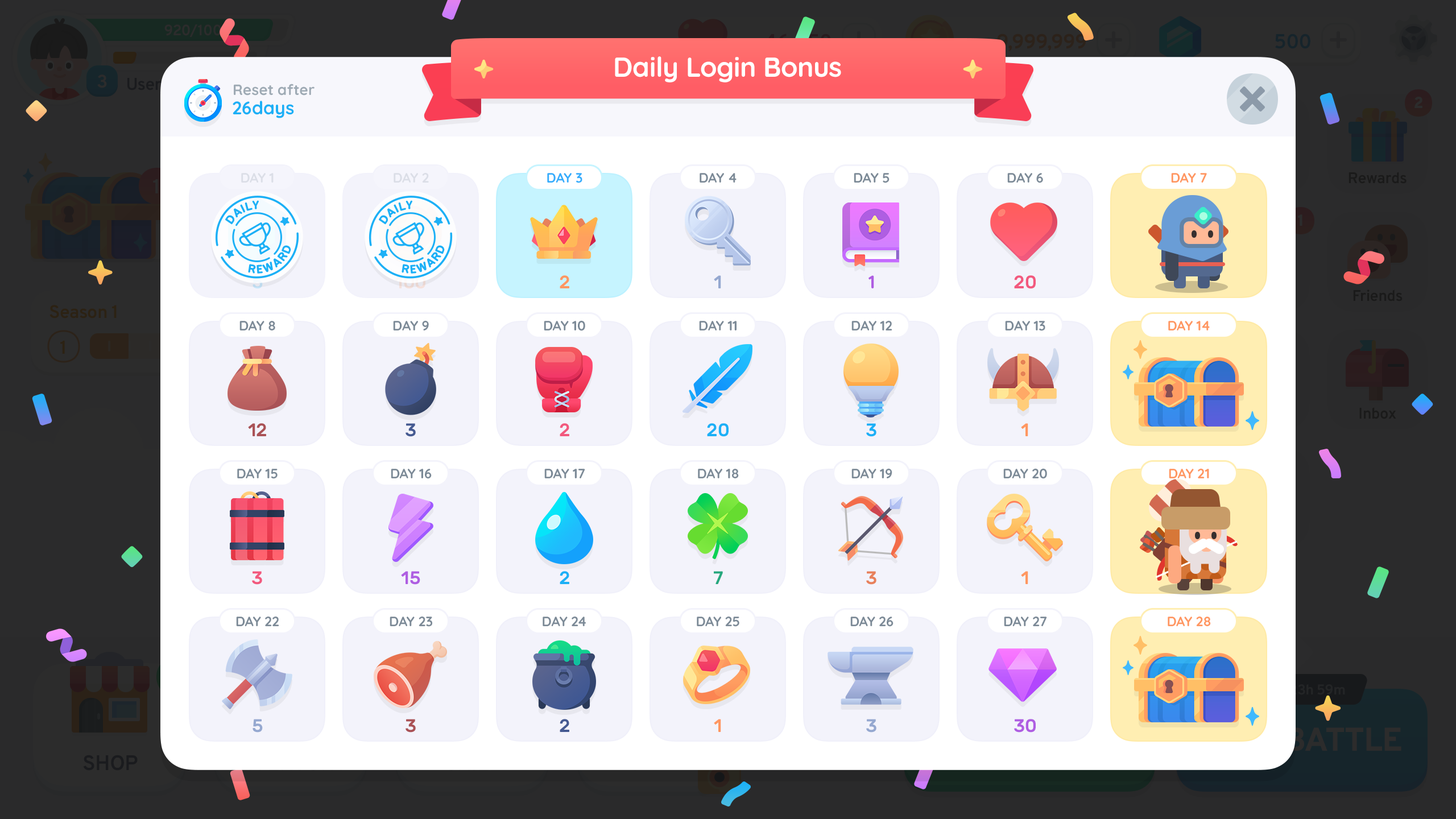
<style>
.page{position:relative;width:1456px;height:819px;background:#ffffff}
.page>*{position:absolute;margin:0}
.t1{font:27.3px "Quicksand-Bold";letter-spacing:-0.01em;color:#ffffff}
.t2{font:14.8px "Quicksand-Bold";color:#9eaab4}
.t3{font:18.2px "Quicksand-Bold";color:#1cb0f6}
.t4{font:13.6px "Quicksand-Bold";letter-spacing:-0.01em;color:#dbdee7;text-transform:uppercase}
.t5{font:13.6px "Quicksand-Bold";letter-spacing:-0.01em;color:#34adfc;text-transform:uppercase}
.t6{font:13.6px "Quicksand-Bold";letter-spacing:-0.01em;color:#7c8a97;text-transform:uppercase}
.t7{font:13.6px "Quicksand-Bold";letter-spacing:-0.01em;color:#ff9761;text-transform:uppercase}
.t8{font:10.9px "BPreplay-Bold";letter-spacing:0.06em;color:#1cb0f6;text-transform:uppercase;scale:1.09 1}
.t9{font:10.9px "BPreplay-Bold";letter-spacing:0.15em;color:#1cb0f6;text-transform:uppercase;scale:1.09 1}
.t10{font:18.2px "Rubik-Medium";letter-spacing:-0.01em}
.t11{font:18.2px "Rubik-Medium";letter-spacing:-0.01em;color:#ff9761}
.t12{font:18.2px "Rubik-Medium";letter-spacing:-0.01em;color:#95a8d0}
.t13{font:18.2px "Quicksand-Bold";letter-spacing:-0.01em;color:#af5ee2}
.t14{font:18.2px "Rubik-Medium";letter-spacing:-0.01em;color:#f2597e}
.t15{font:18.2px "Rubik-Medium";letter-spacing:-0.01em;color:#aa5256}
.t16{font:18.2px "Rubik-Medium";letter-spacing:-0.01em;color:#455a92}
.t17{font:18.2px "Rubik-Medium";letter-spacing:-0.01em;color:#1cb0f6}
.t18{font:18.2px "Rubik-Medium";letter-spacing:-0.01em;color:#af5ee2}
.t19{font:18.2px "Rubik-Medium";letter-spacing:-0.01em;color:#25a87e}
.t20{font:18.2px "Rubik-Medium";letter-spacing:-0.01em;color:#e8815b}
</style>
<div class="page">
<p class="t1" style="left:615px;top:56px;width:226px;height:26px">Daily Login Bonus</p>
<p class="t2" style="left:234px;top:84px;width:81px;height:12px">Reset after</p>
<p class="t3" style="left:233px;top:101px;width:61px;height:17px">26days</p>
<p class="t4" style="left:241px;top:173px;width:33px;height:10px">Day 1</p>
<p class="t4" style="left:394px;top:173px;width:35px;height:10px">Day 2</p>
<p class="t5" style="left:547px;top:173px;width:35px;height:10px">Day 3</p>
<p class="t6" style="left:700px;top:173px;width:37px;height:10px">Day 4</p>
<p class="t6" style="left:854px;top:173px;width:36px;height:10px">Day 5</p>
<p class="t6" style="left:1007px;top:173px;width:36px;height:10px">Day 6</p>
<p class="t7" style="left:1171px;top:173px;width:36px;height:10px">Day 7</p>
<p class="t8" style="left:225px;top:200px;width:34px;height:25px;rotate:-30deg">Daily</p>
<p class="t8" style="left:379px;top:200px;width:33px;height:25px;rotate:-30deg">Daily</p>
<p class="t9" style="left:248px;top:245px;width:43px;height:29px;rotate:-30deg">reward</p>
<p class="t9" style="left:402px;top:245px;width:43px;height:29px;rotate:-30deg">reward</p>
<p class="t10" style="left:395px;top:275px;width:30px;height:14px">100</p>
<p class="t11" style="left:560px;top:275px;width:9px;height:13px">2</p>
<p class="t12" style="left:714px;top:275px;width:7px;height:13px">1</p>
<p class="t13" style="left:868px;top:275px;width:6px;height:13px">1</p>
<p class="t14" style="left:1014px;top:275px;width:22px;height:14px">20</p>
<p class="t6" style="left:239px;top:321px;width:36px;height:9px">Day 8</p>
<p class="t6" style="left:393px;top:321px;width:36px;height:9px">Day 9</p>
<p class="t6" style="left:544px;top:321px;width:41px;height:10px">Day 10</p>
<p class="t6" style="left:699px;top:321px;width:38px;height:9px">Day 11</p>
<p class="t6" style="left:851px;top:321px;width:41px;height:9px">Day 12</p>
<p class="t6" style="left:1005px;top:321px;width:40px;height:10px">Day 13</p>
<p class="t7" style="left:1168px;top:321px;width:42px;height:9px">Day 14</p>
<p class="t15" style="left:248px;top:423px;width:18px;height:13px">12</p>
<p class="t16" style="left:406px;top:423px;width:10px;height:14px">3</p>
<p class="t14" style="left:560px;top:423px;width:9px;height:13px">2</p>
<p class="t17" style="left:707px;top:423px;width:22px;height:14px">20</p>
<p class="t17" style="left:866px;top:423px;width:10px;height:14px">3</p>
<p class="t11" style="left:1021px;top:423px;width:7px;height:13px">1</p>
<p class="t6" style="left:237px;top:469px;width:41px;height:10px">Day 15</p>
<p class="t6" style="left:391px;top:469px;width:41px;height:10px">Day 16</p>
<p class="t6" style="left:544px;top:469px;width:41px;height:9px">Day 17</p>
<p class="t6" style="left:698px;top:469px;width:41px;height:9px">Day 18</p>
<p class="t6" style="left:851px;top:469px;width:41px;height:9px">Day 19</p>
<p class="t6" style="left:1003px;top:469px;width:44px;height:10px">Day 20</p>
<p class="t7" style="left:1169px;top:469px;width:40px;height:9px">Day 21</p>
<p class="t14" style="left:252px;top:571px;width:10px;height:14px">3</p>
<p class="t18" style="left:401px;top:571px;width:19px;height:14px">15</p>
<p class="t17" style="left:560px;top:571px;width:9px;height:13px">2</p>
<p class="t19" style="left:714px;top:571px;width:9px;height:13px">7</p>
<p class="t20" style="left:866px;top:571px;width:10px;height:14px">3</p>
<p class="t11" style="left:1021px;top:571px;width:7px;height:13px">1</p>
<p class="t6" style="left:236px;top:617px;width:43px;height:9px">Day 22</p>
<p class="t6" style="left:390px;top:617px;width:42px;height:10px">Day 23</p>
<p class="t6" style="left:543px;top:617px;width:43px;height:9px">Day 24</p>
<p class="t6" style="left:697px;top:617px;width:42px;height:10px">Day 25</p>
<p class="t6" style="left:850px;top:617px;width:43px;height:10px">Day 26</p>
<p class="t6" style="left:1004px;top:617px;width:43px;height:9px">Day 27</p>
<p class="t7" style="left:1168px;top:617px;width:43px;height:9px">Day 28</p>
<p class="t12" style="left:253px;top:719px;width:10px;height:14px">5</p>
<p class="t15" style="left:406px;top:719px;width:10px;height:14px">3</p>
<p class="t16" style="left:560px;top:719px;width:9px;height:13px">2</p>
<p class="t11" style="left:714px;top:719px;width:7px;height:13px">1</p>
<p class="t12" style="left:866px;top:719px;width:10px;height:14px">3</p>
<p class="t18" style="left:1014px;top:719px;width:22px;height:14px">30</p>
</div>
